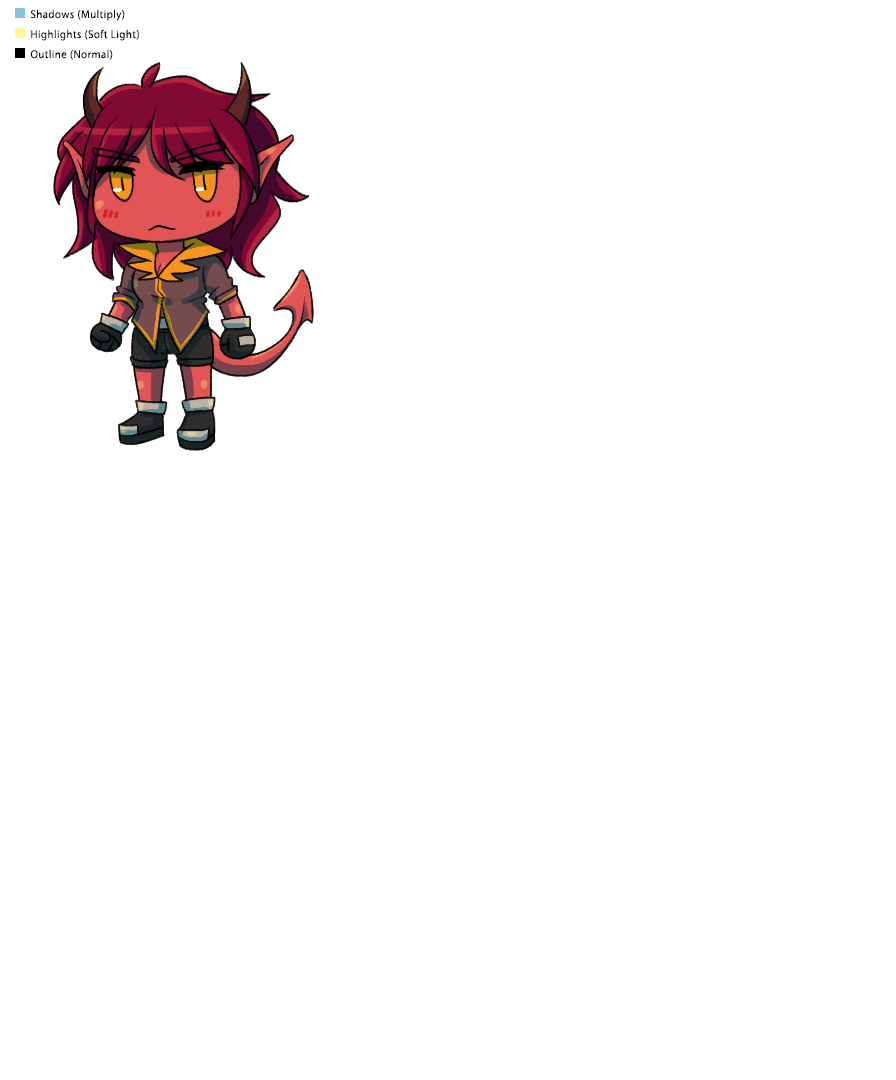
<style>
.page{position:relative;width:896px;height:1080px;background:#ffffff}
.page>*{position:absolute;margin:0}
.t1{font:10px "KozGoPr6N-Regular";letter-spacing:0.05em;color:#000000}
</style>
<div class="page">
<p class="t1" style="left:31px;top:9px;width:94px;height:12px">Shadows (Multiply)</p>
<p class="t1" style="left:31px;top:29px;width:108px;height:12px">Highlights (Soft Light)</p>
<p class="t1" style="left:30px;top:49px;width:83px;height:11px">Outline (Normal)</p>
</div>
